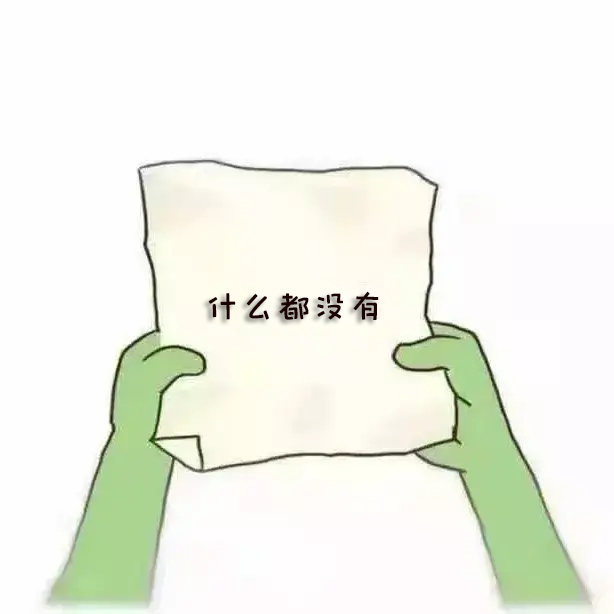
<style>
.page{position:relative;width:614px;height:614px;background:#fefefe}
.page>*{position:absolute;margin:0}
.t1{font:36px "xiaodanchunti";color:#1c0303}
</style>
<div class="page">
<p class="t1" style="left:208px;top:291px;width:171px;height:30px">什么都没有</p>
</div>
